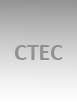
<style>
.page{position:relative;width:77px;height:107px}
.page>*{position:absolute;margin:0}
.t1{font:24px "Calibri-Bold";color:#919292}
</style>
<div class="page">
<p class="t1" style="left:15px;top:45px;width:48px;height:15px">CTEC</p>
</div>
